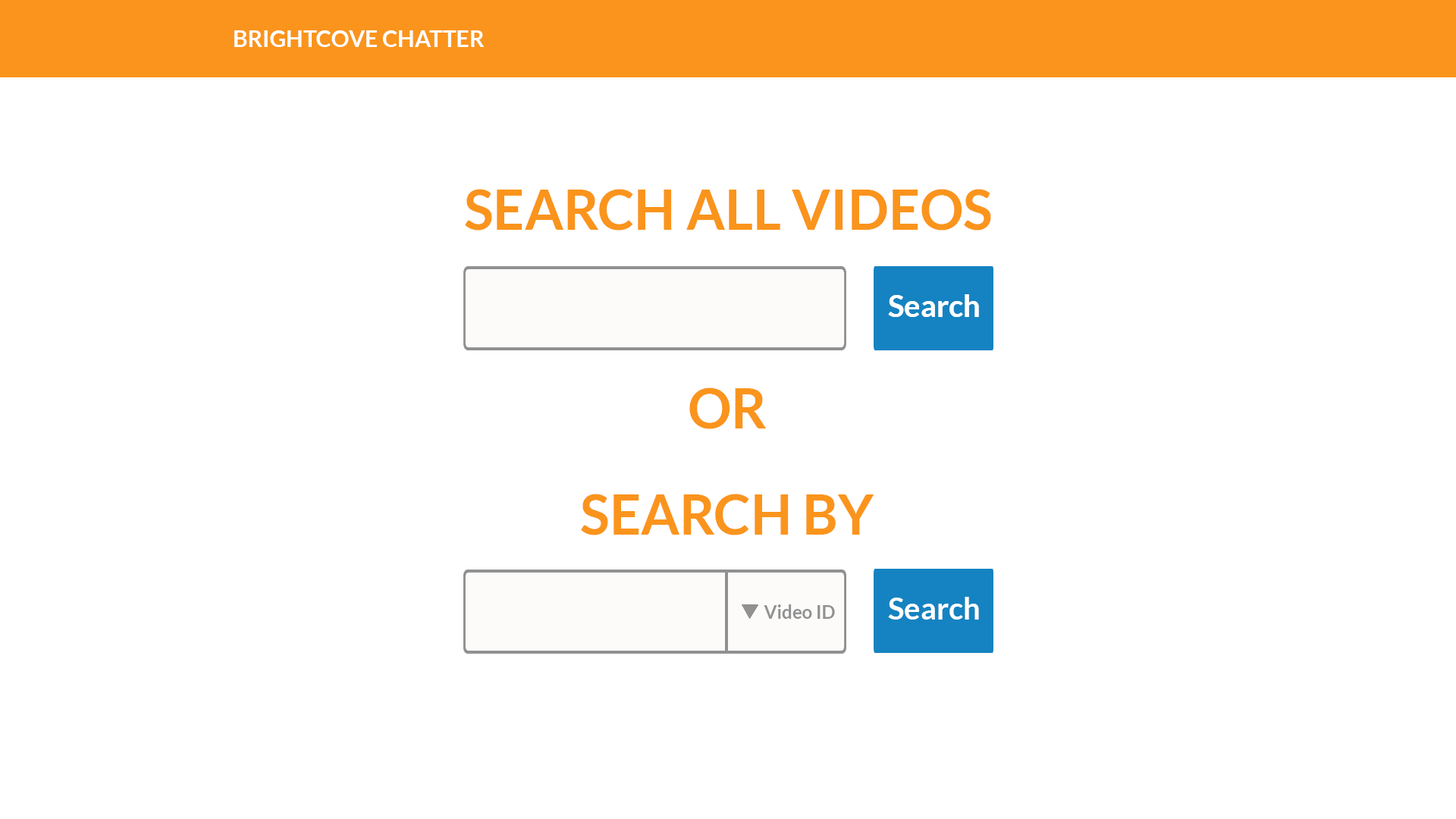
<style>
.page{position:relative;width:1456px;height:819px;background:#ffffff}
.page>*{position:absolute;margin:0}
.t1{font:22.7px "Lato-Bold";color:#ffffff;text-transform:uppercase}
.t2{font:54.6px "Lato-Bold";color:#fa941c;text-transform:uppercase}
.t3{font:30.3px "Lato-Bold";color:#ffffff}
.t4{font:18.2px "Lato-Bold";color:#919191}
</style>
<div class="page">
<p class="t1" style="left:234px;top:30px;width:251px;height:17px">Brightcove CHATTER</p>
<p class="t2" style="left:465px;top:189px;width:526px;height:42px">Search all videos</p>
<p class="t3" style="left:888px;top:294px;width:91px;height:23px">Search</p>
<p class="t3" style="left:888px;top:294px;width:91px;height:23px">Search</p>
<p class="t2" style="left:689px;top:388px;width:77px;height:41px">OR</p>
<p class="t2" style="left:581px;top:494px;width:293px;height:41px">Search by</p>
<p class="t4" style="left:764px;top:604px;width:71px;height:15px">Video ID</p>
<p class="t3" style="left:888px;top:597px;width:91px;height:23px">Search</p>
</div>
